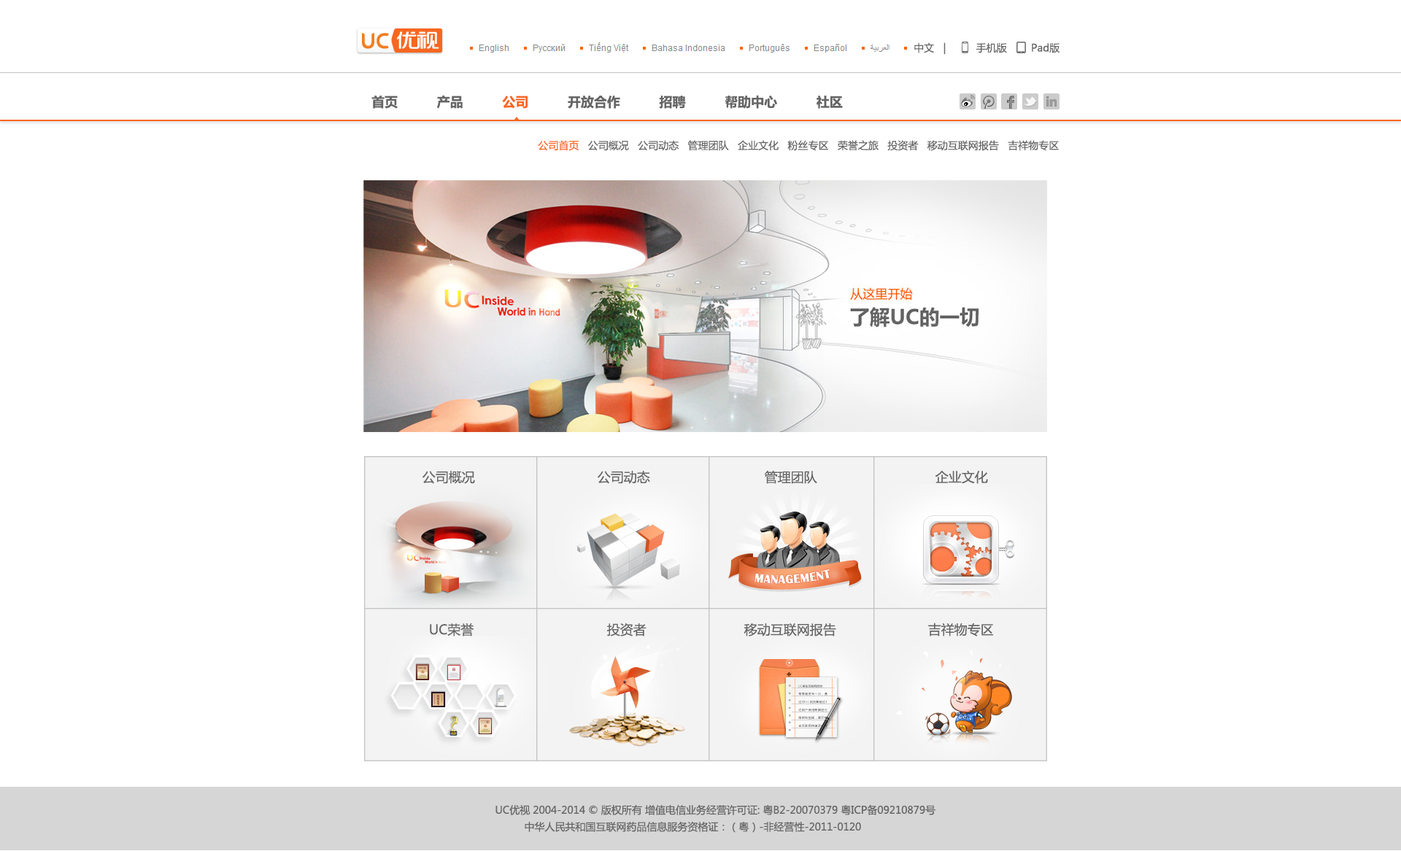
<style>
.page{position:relative;width:1401px;height:851px;background:#ffffff}
.page>*{position:absolute;margin:0}
.t1{font:10.2px "MicrosoftYaHei";color:#656565}
.t2{font:13.1px "MicrosoftYaHei-Bold";color:#656565}
.t3{font:13.1px "MicrosoftYaHei-Bold";color:#f86720}
.t4{font:10.2px "MicrosoftYaHei";color:#f86720}
.t5{font:13.1px "MicrosoftYaHei";color:#656565}
</style>
<div class="page">
<p class="t1" style="left:914px;top:42px;width:146px;height:13px">中文   |          手机版        Pad版</p>
<p class="t2" style="left:371px;top:95px;width:472px;height:14px">首页          产品          <span class="t3">公司</span>          开放合作          招聘          帮助中心          社区</p>
<p class="t1" style="left:538px;top:140px;width:521px;height:11px"><span class="t4">公司首页</span>   公司概况   公司动态   管理团队   企业文化   粉丝专区   荣誉之旅   投资者   移动互联网报告   吉祥物专区</p>
<p class="t5" style="left:423px;top:471px;width:52px;height:13px">公司概况</p>
<p class="t5" style="left:598px;top:471px;width:52px;height:13px">公司动态</p>
<p class="t5" style="left:765px;top:471px;width:52px;height:13px">管理团队</p>
<p class="t5" style="left:935px;top:471px;width:53px;height:13px">企业文化</p>
<p class="t5" style="left:430px;top:623px;width:44px;height:13px">UC荣誉</p>
<p class="t5" style="left:607px;top:623px;width:40px;height:13px">投资者</p>
<p class="t5" style="left:744px;top:623px;width:92px;height:13px">移动互联网报告</p>
<p class="t5" style="left:928px;top:623px;width:65px;height:13px">吉祥物专区</p>
<p class="t1" style="left:496px;top:804px;width:440px;height:11px">UC优视 2004-2014 © 版权所有 增值电信业务经营许可证: 粤B2-20070379 粤ICP备09210879号</p>
<p class="t1" style="left:525px;top:821px;width:336px;height:12px">中华人民共和国互联网药品信息服务资格证：（粤）-非经营性-2011-0120</p>
</div>
